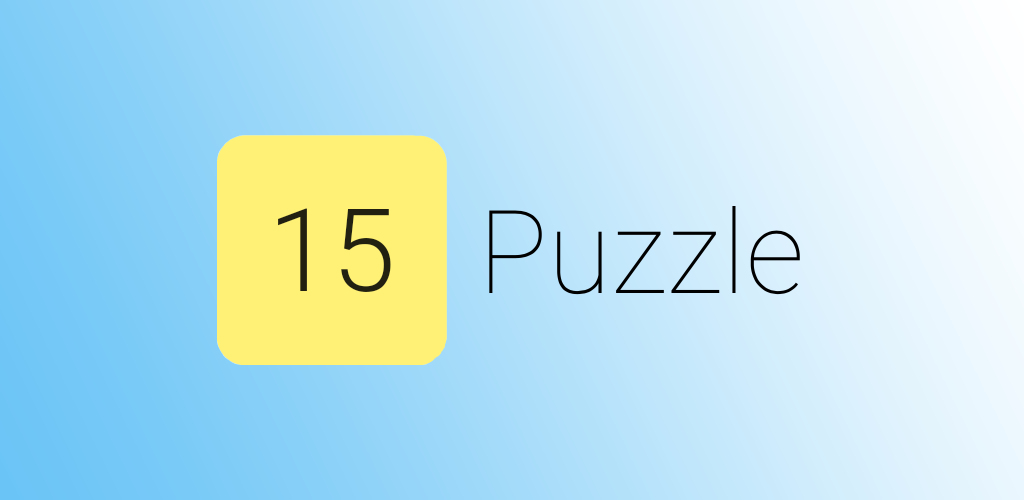
<style>
.page{position:relative;width:1024px;height:500px}
.page>*{position:absolute;margin:0}
.t1{font:116px "Roboto-Thin";color:#000000}
</style>
<div class="page">
<p class="t1" style="left:489px;top:206px;width:311px;height:89px">Puzzle</p>
</div>
